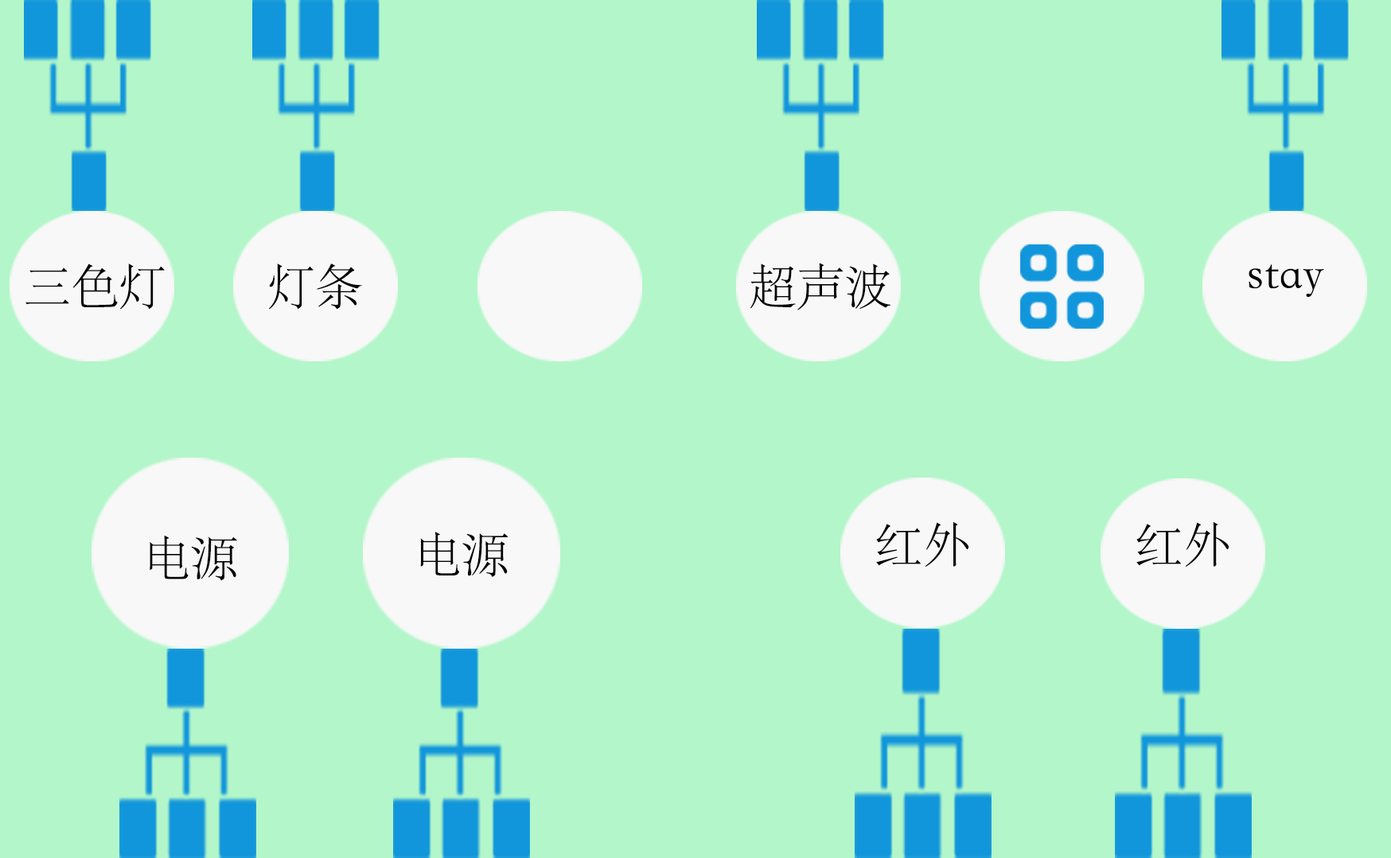
<style>
.page{position:relative;width:1391px;height:858px;background:#b3f6c9}
.page>*{position:absolute;margin:0}
.t1{font:47.7px "STSong";color:#040404}
</style>
<div class="page">
<p class="t1" style="left:25px;top:263px;width:140px;height:46px">三色灯</p>
<p class="t1" style="left:269px;top:263px;width:93px;height:46px">灯条</p>
<p class="t1" style="left:750px;top:263px;width:140px;height:47px">超声波</p>
<p class="t1" style="left:1248px;top:264px;width:76px;height:34px">stay</p>
<p class="t1" style="left:876px;top:521px;width:93px;height:45px">红外</p>
<p class="t1" style="left:1136px;top:521px;width:93px;height:45px">红外</p>
<p class="t1" style="left:420px;top:531px;width:88px;height:46px">电源</p>
<p class="t1" style="left:150px;top:535px;width:87px;height:46px">电源</p>
</div>
